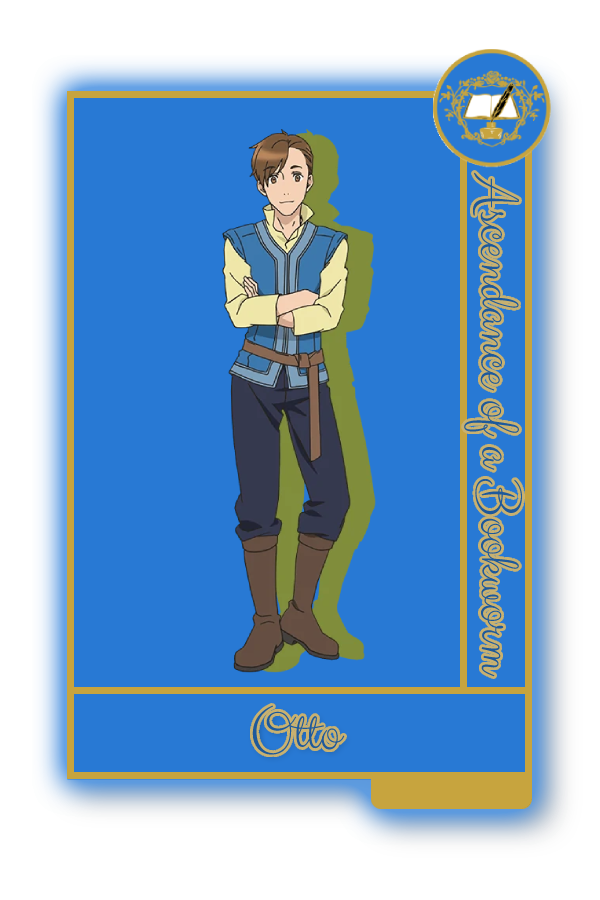
<style>
.page{position:relative;width:600px;height:900px;background:#2879d4}
.page>*{position:absolute;margin:0}
.t1{font:58px "ClickerScript-Regular";color:#1d599c}
.t2{font:60px "ClickerScript-Regular";color:#1d599c}
</style>
<div class="page">
<p class="t1" style="left:464px;top:172px;width:59px;height:505px;rotate:90deg">Ascendance of a Bookworm</p>
<p class="t2" style="left:252px;top:705px;width:93px;height:50px">Otto</p>
</div>
